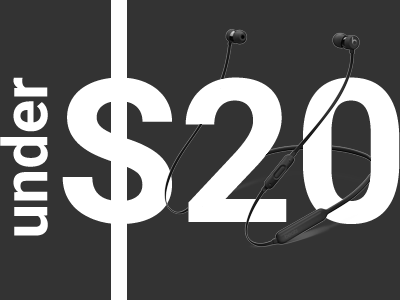
<style>
.page{position:relative;width:400px;height:300px;background:#333333}
.page>*{position:absolute;margin:0}
.t1{font:62.5px "Roboto-Bold";color:#ffffff}
.t2{font:200px "Roboto-Bold";color:#ffffff}
</style>
<div class="page">
<p class="t1" style="left:0px;top:77px;width:48px;height:159px;rotate:-90deg">under</p>
<p class="t2" style="left:62px;top:77px;width:338px;height:147px">S20</p>
</div>
